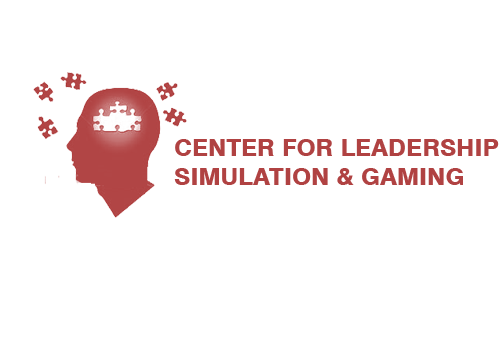
<style>
.page{position:relative;width:504px;height:360px;background:#ffffff}
.page>*{position:absolute;margin:0}
.t1{font:24px "Swiss721BT-Heavy";color:#b04242}
</style>
<div class="page">
<p class="t1" style="left:174px;top:139px;width:325px;height:46px">CENTER FOR LEADERSHIP<br>SIMULATION &amp; GAMING</p>
</div>
